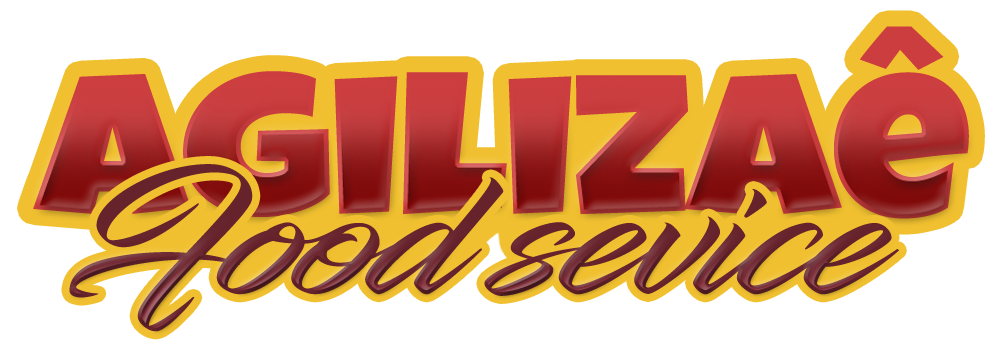
<style>
.page{position:relative;width:1000px;height:352px;background:#ffffff}
.page>*{position:absolute;margin:0}
.t1{font:203px "LuckiestGuy-Regular";letter-spacing:-0.01em;scale:1.18 1}
.t2{font:172.5px "InfiniteStroke-Condensed";letter-spacing:-0.01em;color:#67242d;scale:1.18 1}
</style>
<div class="page">
<p class="t1" style="left:33px;top:26px;width:936px;height:193px">Agilizaê</p>
<p class="t1" style="left:33px;top:26px;width:936px;height:193px">Agilizaê</p>
<p class="t2" style="left:69px;top:164px;width:830px;height:168px">Food sevice</p>
<p class="t2" style="left:69px;top:164px;width:830px;height:168px">Food sevice</p>
</div>
